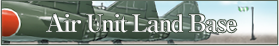
<style>
.page{position:relative;width:279px;height:46px}
.page>*{position:absolute;margin:0}
.t1{font:24px "RyuminPro-ExBold";letter-spacing:-0.08em;color:#ffffff}
</style>
<div class="page">
<p class="t1" style="left:46px;top:13px;width:191px;height:20px">Air Unit Land Base</p>
</div>
